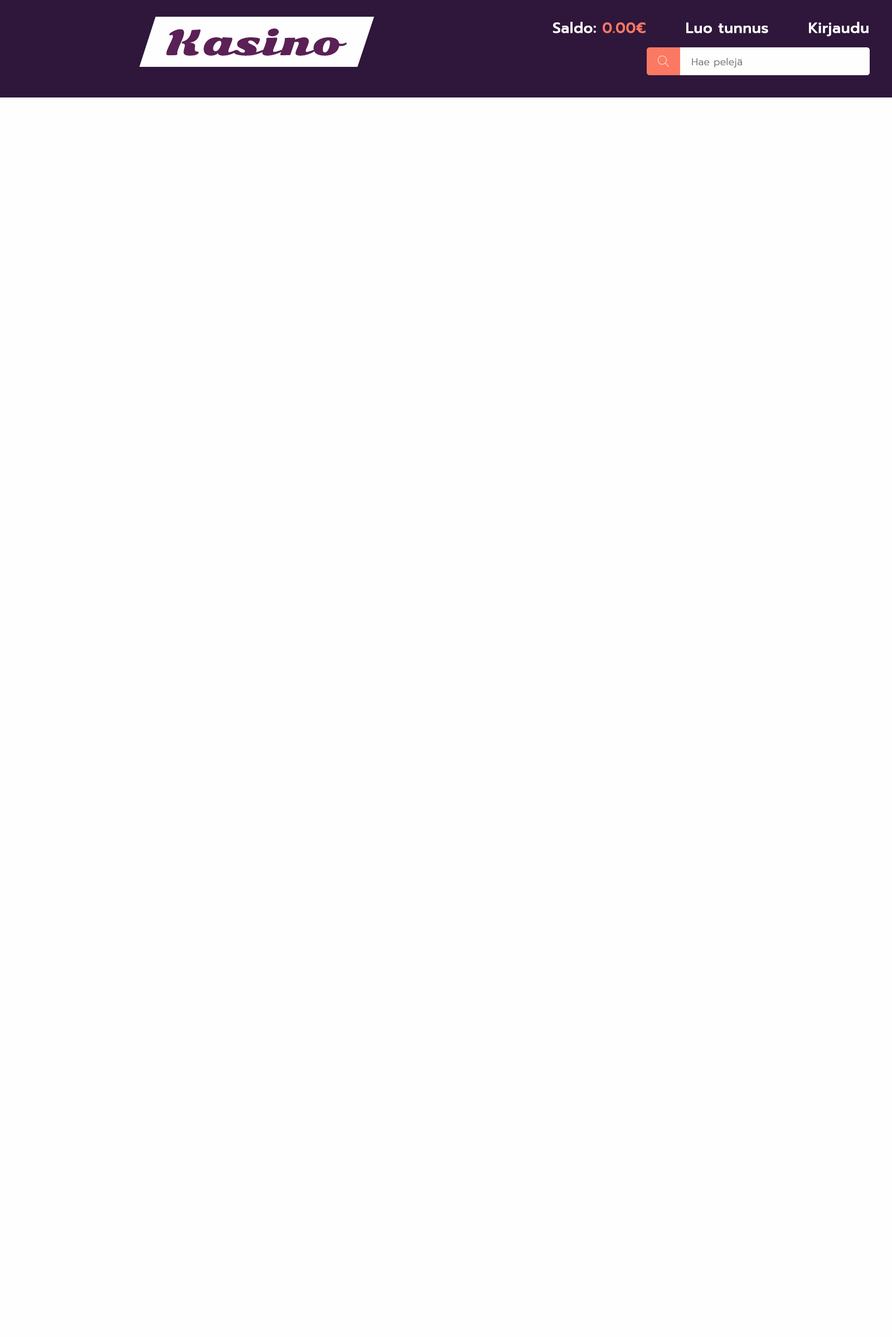
<style>
.page{position:relative;width:892px;height:1337px;background:#fefefe}
.page>*{position:absolute;margin:0}
.t1{font:33.4px "SonsieOne-Regular";letter-spacing:0.025em;color:#5b2055;font-weight:bold}
.t2{font:14.5px "Prompt-Medium";color:#fefefe;font-weight:bold}
.t3{font:14.5px "Prompt-Medium";color:#fb7963;font-weight:bold}
.t4{font:9.5px "Prompt-Light";color:#808080;font-weight:bold}
</style>
<div class="page">
<p class="t1" style="left:166px;top:28px;width:181px;height:28px">Kasino</p>
<p class="t2" style="left:553px;top:22px;width:315px;height:15px">Saldo: <span class="t3">0.00€</span>       Luo tunnus       Kirjaudu</p>
<p class="t4" style="left:692px;top:58px;width:50px;height:9px">Hae pelejä</p>
</div>
